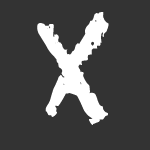
<style>
.page{position:relative;width:150px;height:150px;background:#333333}
.page>*{position:absolute;margin:0}
.t1{font:130px "Chalkduster";color:#ffffff}
</style>
<div class="page">
<p class="t1" style="left:37px;top:12px;width:72px;height:113px">X</p>
</div>
